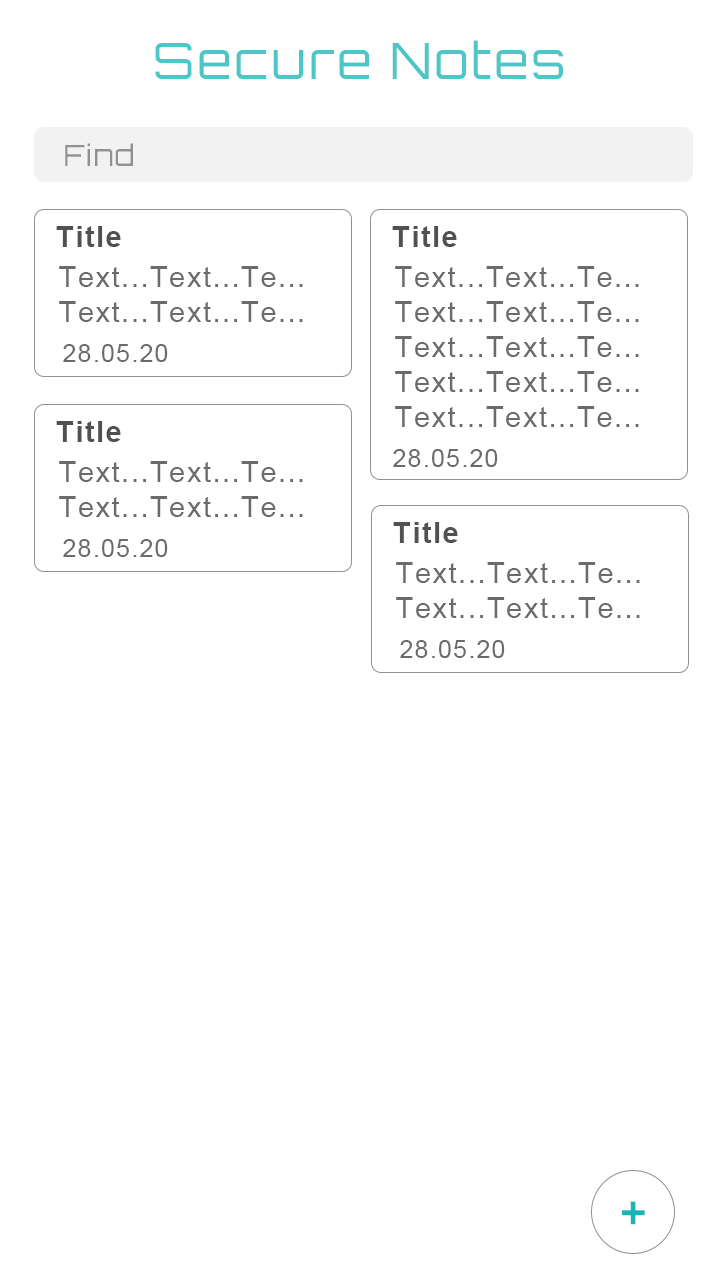
<style>
.page{position:relative;width:720px;height:1280px;background:#ffffff}
.page>*{position:absolute;margin:0}
.t1{font:50px "Orbitron-Regular";letter-spacing:0.05em;color:#4ec6c8}
.t2{font:29.2px "Orbitron-Regular";letter-spacing:0.05em;color:#909191}
.t3{font:29.2px "Arial-BoldMT";letter-spacing:0.05em;color:#525151}
.t4{font:29.2px "ArialMT";letter-spacing:0.05em;color:#6b6b6b}
.t5{font:25px "ArialMT";letter-spacing:0.05em;color:#6b6b6b}
.t6{font:58.3px "Orbitron-Regular";letter-spacing:0.05em;color:#17b5b7}
</style>
<div class="page">
<p class="t1" style="left:155px;top:40px;width:408px;height:39px">Secure Notes</p>
<p class="t2" style="left:65px;top:143px;width:68px;height:23px">Find</p>
<p class="t3" style="left:56px;top:226px;width:65px;height:21px">Title</p>
<p class="t3" style="left:392px;top:226px;width:65px;height:21px">Title</p>
<p class="t4" style="left:59px;top:266px;width:244px;height:56px;text-align:center">Text...Text...Te...<br>Text...Text...Te...</p>
<p class="t4" style="left:395px;top:266px;width:244px;height:161px;text-align:center">Text...Text...Te...<br>Text...Text...Te...<br>Text...Text...Te...<br>Text...Text...Te...<br>Text...Text...Te...</p>
<p class="t5" style="left:63px;top:344px;width:105px;height:18px">28.05.20</p>
<p class="t3" style="left:56px;top:421px;width:65px;height:21px">Title</p>
<p class="t5" style="left:393px;top:449px;width:105px;height:18px">28.05.20</p>
<p class="t4" style="left:59px;top:461px;width:244px;height:56px;text-align:center">Text...Text...Te...<br>Text...Text...Te...</p>
<p class="t3" style="left:393px;top:522px;width:65px;height:21px">Title</p>
<p class="t5" style="left:63px;top:539px;width:105px;height:18px">28.05.20</p>
<p class="t4" style="left:396px;top:562px;width:244px;height:56px;text-align:center">Text...Text...Te...<br>Text...Text...Te...</p>
<p class="t5" style="left:400px;top:640px;width:105px;height:18px">28.05.20</p>
<p class="t6" style="left:622px;top:1201px;width:23px;height:24px">+</p>
</div>
